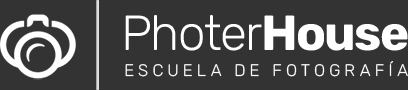
<style>
.page{position:relative;width:408px;height:90px;background:#333333}
.page>*{position:absolute;margin:0}
.t1{font:49.2px "Rubik-Light";letter-spacing:-0.01em;color:#ffffff}
.t2{font:49.2px "RubikRoman-Bold";letter-spacing:-0.01em;color:#ffffff}
.t3{font:16.7px "Rubik-Light";letter-spacing:0.252em;color:#ffffff}
</style>
<div class="page">
<p class="t1" style="left:125px;top:15px;width:283px;height:36px">Photer<span class="t2">House</span></p>
<p class="t3" style="left:125px;top:61px;width:283px;height:16px">ESCUELA DE FOTOGRAFÍA</p>
</div>
